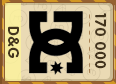
<style>
.page{position:relative;width:116px;height:84px;background:#eadab4}
.page>*{position:absolute;margin:0}
.t1{font:15px "RotondaC-Bold";letter-spacing:0.04em;color:#43341d;text-transform:uppercase}
</style>
<div class="page">
<p class="t1" style="left:95px;top:13px;width:11px;height:56px;rotate:90deg">170 000</p>
<p class="t1" style="left:8px;top:26px;width:11px;height:32px;rotate:90deg">D&amp;G</p>
</div>
